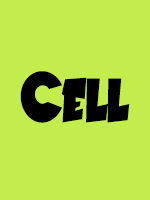
<style>
.page{position:relative;width:150px;height:200px;background:#c3ed4c}
.page>*{position:absolute;margin:0}
.t1{font:73px "SaiyanSans";color:#000000}
</style>
<div class="page">
<p class="t1" style="left:20px;top:71px;width:110px;height:52px">Cell</p>
</div>
